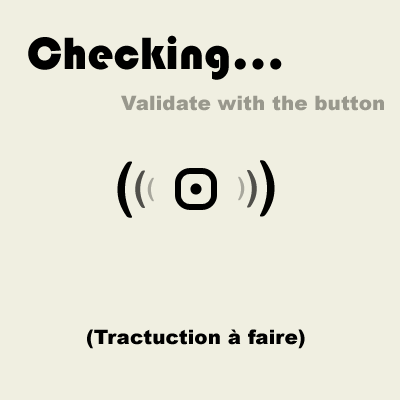
<style>
.page{position:relative;width:400px;height:400px;background:#f0efe1}
.page>*{position:absolute;margin:0}
.t1{font:47px "Bauhaus93";color:#000000}
.t2{font:20px "Arial-Black";color:#99988d}
.t3{font:60px "ArialRoundedMTBold";color:#010100}
.t4{font:40px "ArialRoundedMTBold";color:#504f4a}
.t5{font:25px "ArialRoundedMTBold";color:#a8a79d}
.t6{font:20px "Arial-Black";color:#000000}
</style>
<div class="page">
<p class="t1" style="left:28px;top:35px;width:254px;height:45px">Checking...</p>
<p class="t2" style="left:121px;top:95px;width:263px;height:16px">Validate with the button</p>
<p class="t3" style="left:117px;top:161px;width:15px;height:57px;rotate:180deg">)</p>
<p class="t3" style="left:260px;top:160px;width:15px;height:57px">)</p>
<p class="t4" style="left:135px;top:170px;width:10px;height:38px;rotate:180deg">)</p>
<p class="t4" style="left:247px;top:170px;width:10px;height:38px">)</p>
<p class="t5" style="left:147px;top:177px;width:7px;height:25px;rotate:180deg">)</p>
<p class="t1" style="left:190px;top:183px;width:12px;height:12px">.</p>
<p class="t5" style="left:238px;top:176px;width:7px;height:25px">)</p>
<p class="t6" style="left:87px;top:329px;width:218px;height:20px">(Tractuction à faire)</p>
</div>
